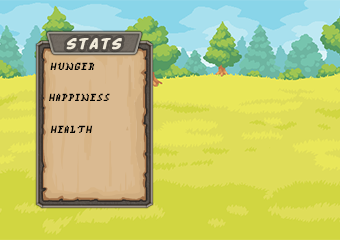
<style>
.page{position:relative;width:340px;height:240px}
.page>*{position:absolute;margin:0}
.t1{font:20.8px "BuddyChampion";letter-spacing:0.075em;color:#f1ebdb;text-transform:uppercase;font-weight:bold;font-style:italic}
.t2{font:8.3px "MinimalPixel2";letter-spacing:0.075em;color:#000000;text-transform:uppercase;font-weight:bold;font-style:italic}
</style>
<div class="page">
<p class="t1" style="left:66px;top:38px;width:56px;height:12px">stats</p>
<p class="t2" style="left:50px;top:62px;width:45px;height:8px">hunger</p>
<p class="t2" style="left:49px;top:93px;width:61px;height:8px">happiness</p>
<p class="t2" style="left:50px;top:125px;width:43px;height:8px">health</p>
</div>
